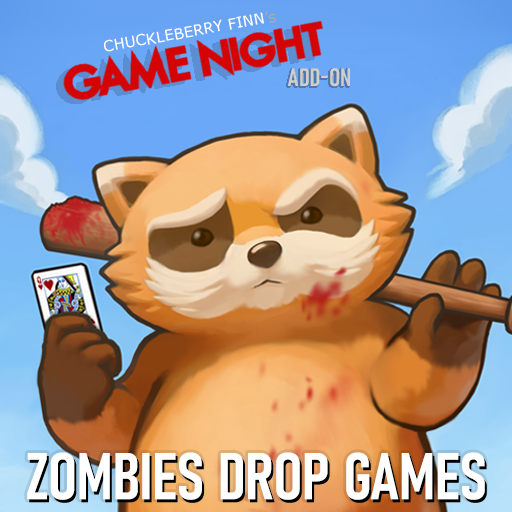
<style>
.page{position:relative;width:512px;height:512px}
.page>*{position:absolute;margin:0}
.t1{font:15px "Verdana";color:#ffffff}
.t2{font:15px "Verdana";color:#ababab}
.t3{font:25px "Bahnschrift-SemiBoldCondensed";color:#cfcfcf}
.t4{font:65px "Bahnschrift-SemiBoldCondensed";color:#ffffff;font-weight:bold}
</style>
<div class="page">
<p class="t1" style="left:104px;top:11px;width:172px;height:41px;rotate:-10deg">CHUCKLEBERRY FINN<span class="t2">’s</span></p>
<p class="t3" style="left:287px;top:68px;width:63px;height:19px">ADD-ON</p>
<p class="t4" style="left:27px;top:452px;width:458px;height:48px">ZOMBIES DROP GAMES</p>
</div>
